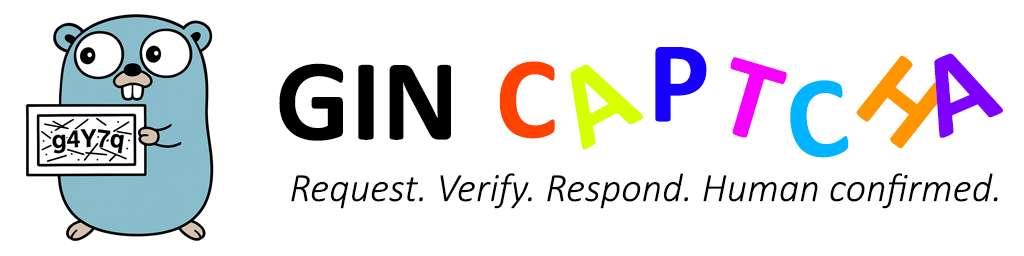
<style>
.page{position:relative;width:1024px;height:256px;background:#ffffff}
.page>*{position:absolute;margin:0}
.t1{font:117.6px "Calibri-Bold";color:#1800ff}
.t2{font:117.6px "Calibri-Bold";color:#7e00ff}
.t3{font:117.6px "Calibri-Bold";color:#000000}
.t4{font:117.6px "Calibri-Bold";color:#ff4200}
.t5{font:117.6px "Calibri-Bold";color:#d8ff00}
.t6{font:117.6px "Calibri-Bold";color:#f600ff}
.t7{font:117.6px "Calibri-Bold";color:#ff9600}
.t8{font:117.6px "Calibri-Bold";color:#00b4ff}
.t9{font:40.4px "Calibri-LightItalic";color:#000000}
</style>
<div class="page">
<p class="t1" style="left:655px;top:47px;width:52px;height:75px">P</p>
<p class="t2" style="left:934px;top:53px;width:69px;height:85px;rotate:-23deg">A</p>
<p class="t3" style="left:279px;top:63px;width:172px;height:78px">GIN</p>
<p class="t4" style="left:499px;top:61px;width:56px;height:78px">C</p>
<p class="t5" style="left:570px;top:64px;width:74px;height:86px;rotate:-28deg">A</p>
<p class="t6" style="left:730px;top:57px;width:57px;height:81px;rotate:17deg">T</p>
<p class="t7" style="left:856px;top:55px;width:91px;height:94px;rotate:38deg">H</p>
<p class="t8" style="left:790px;top:80px;width:59px;height:78px;rotate:-6deg">C</p>
<p class="t9" style="left:291px;top:173px;width:707px;height:36px">Request. Verify. Respond. Human confirmed.</p>
</div>
